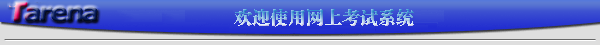
<style>
.page{position:relative;width:600px;height:45px;background:#dedede}
.page>*{position:absolute;margin:0}
.t1{font:18px "FZCSJW--GB1-0"}
</style>
<div class="page">
<p class="t1" style="left:234px;top:9px;width:180px;height:18px">欢迎使用网上考试系统</p>
</div>
